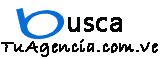
<style>
.page{position:relative;width:160px;height:59px;background:#ffffff}
.page>*{position:absolute;margin:0}
.t1{font:27px "MyanmarText";letter-spacing:0.025em;color:#070707;font-weight:bold}
.t2{font:18px "BradleyHandITC";letter-spacing:0.025em;color:#070707;font-weight:bold}
</style>
<div class="page">
<p class="t1" style="left:68px;top:17px;width:54px;height:15px">usca</p>
<p class="t2" style="left:1px;top:39px;width:157px;height:18px">TuAgencia.com.ve</p>
</div>
